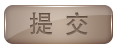
<style>
.page{position:relative;width:118px;height:48px;background:#ffffff}
.page>*{position:absolute;margin:0}
.t1{font:25px "AdobeHeitiStd-Regular";color:#8a7363}
</style>
<div class="page">
<p class="t1" style="left:29px;top:12px;width:59px;height:24px">提  交</p>
</div>
